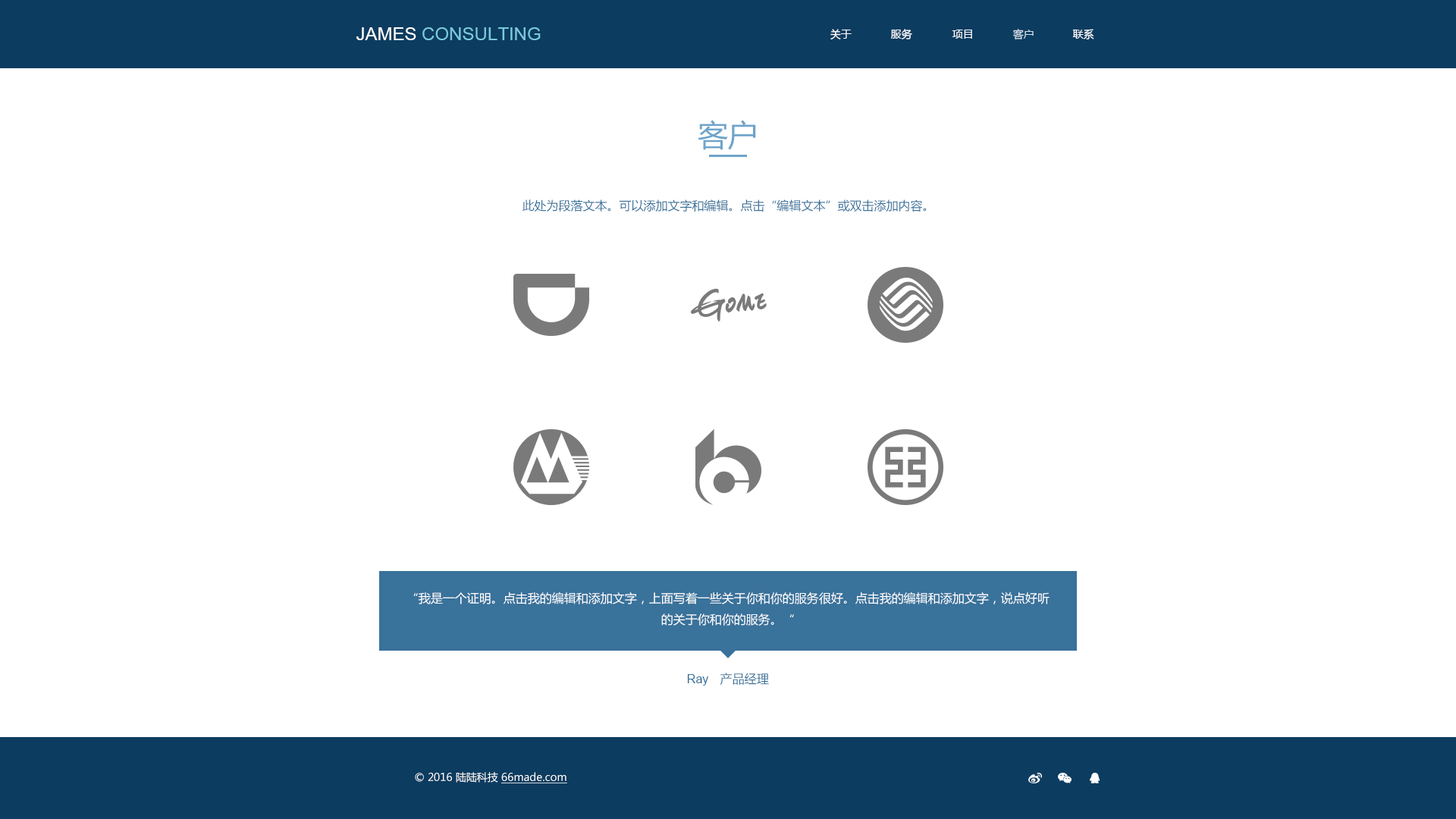
<style>
.page{position:relative;width:1456px;height:819px;background:#ffffff}
.page>*{position:absolute;margin:0}
.t1{font:18.2px "ArialMT";color:#79cada}
.t2{font:18.2px "ArialMT";color:#ffffff}
.t3{font:10.6px "MicrosoftYaHei";color:#ffffff}
.t4{font:10.6px "MicrosoftYaHei";color:#d1e0eb}
.t5{font:30.3px "MicrosoftYaHei";color:#6ea4ca}
.t6{font:12.1px "MicrosoftYaHei";color:#39729b}
.t7{font:12.1px "MicrosoftYaHei";color:#ffffff}
.t8{font:12.1px "ArialMT";color:#39729b}
.t9{font:10.6px "MicrosoftYaHei";color:#ffffff;text-decoration:underline}
</style>
<div class="page">
<p class="t1" style="left:356px;top:27px;width:185px;height:13px"><span class="t2">JAMES </span>CONSULTING</p>
<p class="t3" style="left:830px;top:29px;width:22px;height:10px">关于</p>
<p class="t3" style="left:891px;top:29px;width:21px;height:10px">服务</p>
<p class="t3" style="left:952px;top:30px;width:20px;height:9px">项目</p>
<p class="t4" style="left:1013px;top:29px;width:21px;height:10px">客户</p>
<p class="t3" style="left:1072px;top:29px;width:22px;height:10px">联系</p>
<p class="t5" style="left:698px;top:120px;width:58px;height:30px">客户</p>
<p class="t6" style="left:522px;top:199px;width:405px;height:13px">此处为段落文本。可以添加文字和编辑。点击“编辑文本”或双击添加内容。</p>
<p class="t7" style="left:413px;top:592px;width:637px;height:34px;text-align:center">“我是一个证明。点击我的编辑和添加文字，上面写着一些关于你和你的服务很好。点击我的编辑和添加文字，说点好听的关于你和你的服务。“</p>
<p class="t8" style="left:687px;top:674px;width:21px;height:12px">Ray</p>
<p class="t6" style="left:720px;top:673px;width:49px;height:12px">产品经理</p>
<p class="t3" style="left:415px;top:772px;width:152px;height:11px">© 2016 陆陆科技 <span class="t9">66made.com</span></p>
</div>
